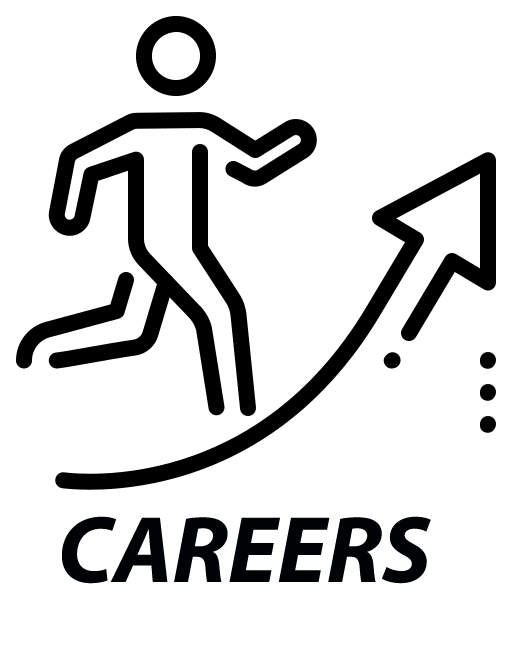
<style>
.page{position:relative;width:512px;height:646px;background:#ffffff}
.page>*{position:absolute;margin:0}
.t1{font:133.3px "MyriadArabic-BoldIt";color:#000305;text-transform:uppercase}
</style>
<div class="page">
<p class="t1" style="left:62px;top:516px;width:369px;height:68px">Careers</p>
</div>
